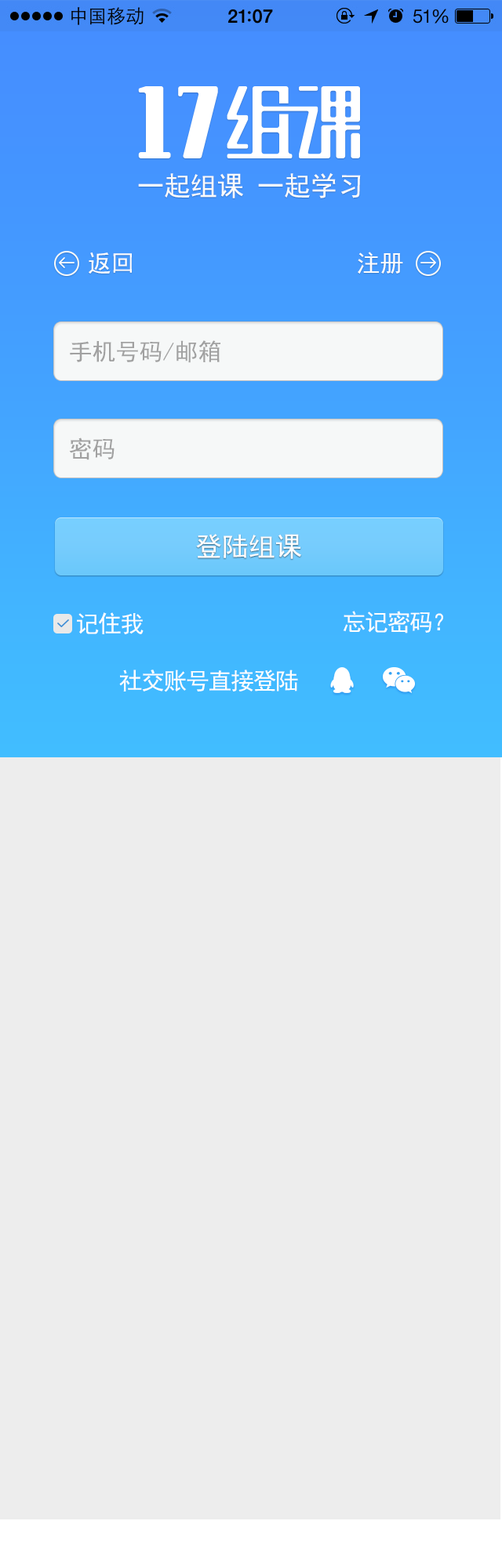
<style>
.page{position:relative;width:502px;height:1568px;background:#ededed}
.page>*{position:absolute;margin:0}
.t1{font:26.7px "SimHei";color:#fbfbfb}
.t2{font:23.5px "SimHei";color:#fefefe}
.t3{font:23.5px "SimHei";color:#a1a1a1}
.t4{font:26.7px "SimHei";color:#fefefe}
.t5{font:23.5px "SimHei";letter-spacing:-0.05em;color:#fefefe}
</style>
<div class="page">
<p class="t1" style="left:138px;top:172px;width:223px;height:26px">一起组课 一起学习</p>
<p class="t2" style="left:89px;top:252px;width:43px;height:22px">返回</p>
<p class="t2" style="left:358px;top:252px;width:45px;height:22px">注册</p>
<p class="t3" style="left:70px;top:340px;width:150px;height:23px">手机号码/邮箱</p>
<p class="t3" style="left:69px;top:437px;width:45px;height:23px">密码</p>
<p class="t4" style="left:196px;top:534px;width:105px;height:25px">登陆组课</p>
<p class="t5" style="left:77px;top:612px;width:66px;height:22px">记住我</p>
<p class="t5" style="left:343px;top:611px;width:100px;height:22px">忘记密码？</p>
<p class="t5" style="left:119px;top:670px;width:179px;height:22px">社交账号直接登陆</p>
</div>
